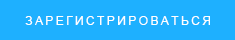
<style>
.page{position:relative;width:235px;height:40px;background:#1eb0ff}
.page>*{position:absolute;margin:0}
.t1{font:12px "ArialMT";letter-spacing:0.2em;color:#ffffff;text-transform:uppercase}
</style>
<div class="page">
<p class="t1" style="left:25px;top:16px;width:185px;height:9px">Зарегистрироваться</p>
</div>
